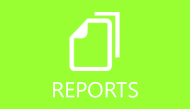
<style>
.page{position:relative;width:190px;height:109px;background:#99ff33}
.page>*{position:absolute;margin:0}
.t1{font:21.6px "SegoeUI";color:#ffffff}
</style>
<div class="page">
<p class="t1" style="left:53px;top:82px;width:85px;height:16px">REPORTS</p>
</div>
